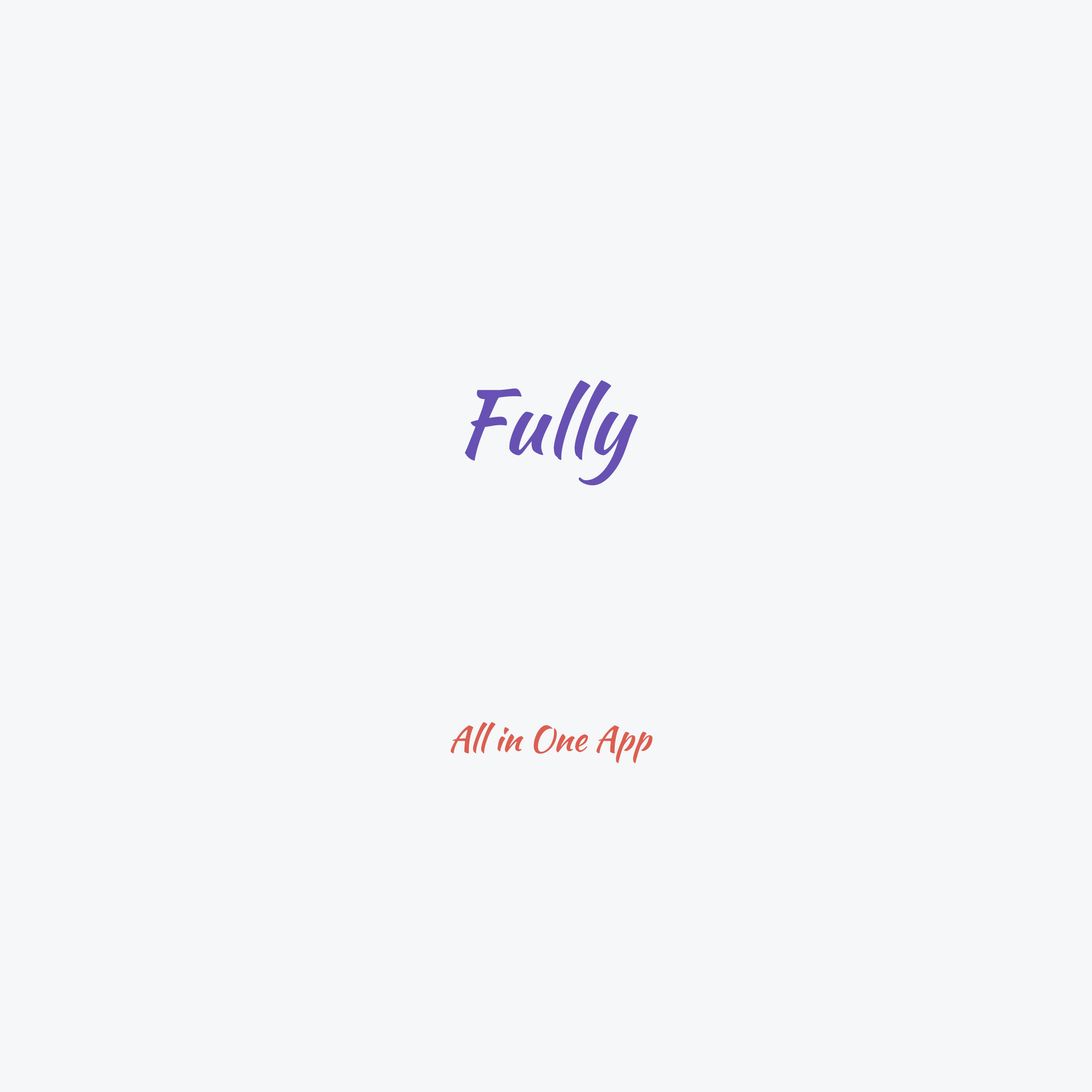
<style>
.page{position:relative;width:1092px;height:1092px;background:#f5f7f8}
.page>*{position:absolute;margin:0}
.t1{font:88.1px "KaushanScript-Regular";color:#6751b3}
.t2{font:34.4px "KaushanScript-Regular";color:#dc5e50}
</style>
<div class="page">
<p class="t1" style="left:465px;top:380px;width:173px;height:106px">Fully</p>
<p class="t2" style="left:451px;top:722px;width:202px;height:42px">All in One App</p>
</div>
